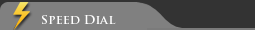
<style>
.page{position:relative;width:255px;height:30px;background:#808080}
.page>*{position:absolute;margin:0}
.t1{font:12px "TrajanPro-Bold";color:#ffffff;scale:1.05 1}
</style>
<div class="page">
<p class="t1" style="left:42px;top:15px;width:74px;height:9px">Speed Dial</p>
</div>
